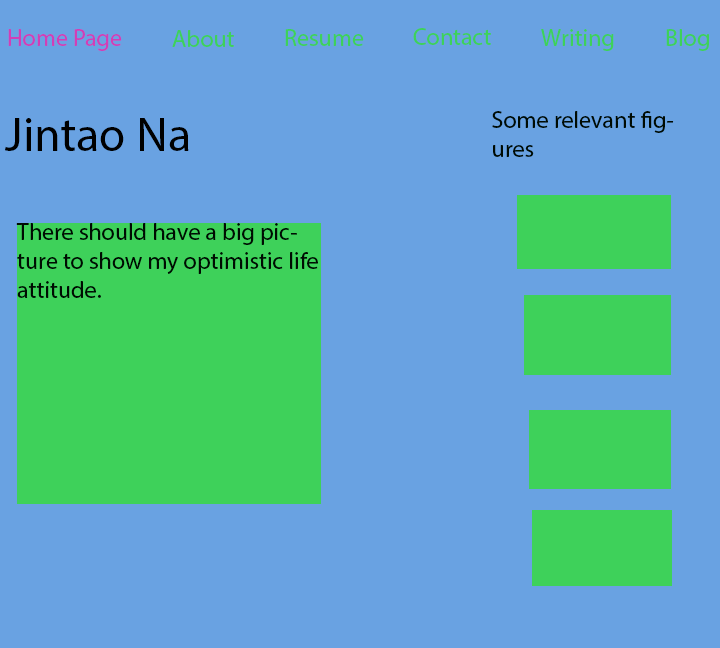
<style>
.page{position:relative;width:720px;height:648px;background:#69a2e2}
.page>*{position:absolute;margin:0}
.t1{font:24px "MyriadPro-Regular";color:#d13eb7}
.t2{font:24px "MyriadPro-Regular";color:#3ed15a}
.t3{font:24px "MyriadPro-Regular";color:#000b02}
.t4{font:48px "MyriadPro-Regular";color:#000000}
</style>
<div class="page">
<p class="t1" style="left:8px;top:29px;width:114px;height:22px">Home Page</p>
<p class="t2" style="left:172px;top:30px;width:62px;height:17px">About</p>
<p class="t2" style="left:285px;top:29px;width:79px;height:17px">Resume</p>
<p class="t2" style="left:413px;top:28px;width:78px;height:17px">Contact</p>
<p class="t2" style="left:541px;top:29px;width:73px;height:22px">Writing</p>
<p class="t2" style="left:666px;top:29px;width:43px;height:22px">Blog</p>
<p class="t3" style="left:492px;top:111px;width:182px;height:46px">Some relevant figures</p>
<p class="t4" style="left:5px;top:118px;width:184px;height:33px">Jintao Na</p>
<p class="t3" style="left:16px;top:223px;width:302px;height:75px">There should have a big picture to show my optimistic life attitude.</p>
</div>
